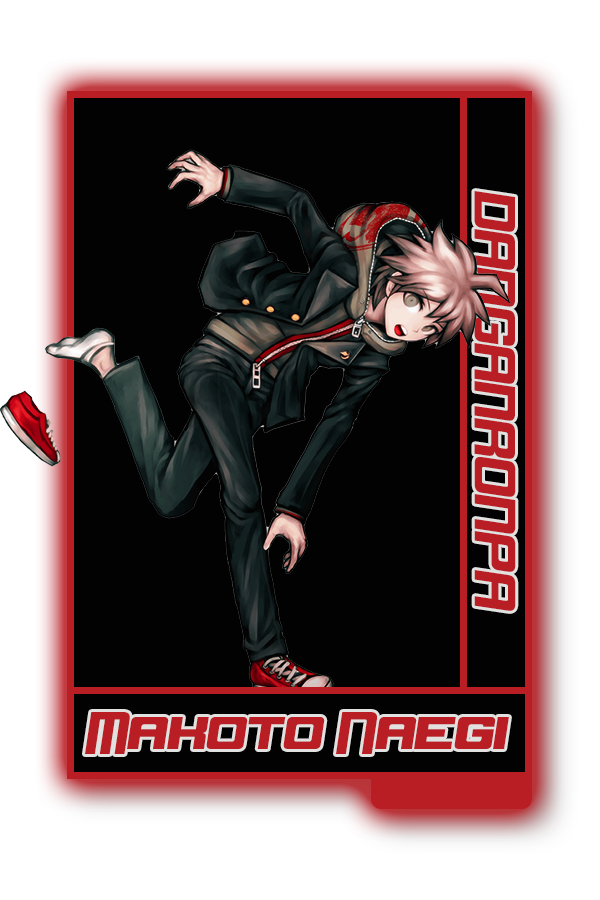
<style>
.page{position:relative;width:600px;height:900px;background:#020202}
.page>*{position:absolute;margin:0}
.t1{font:48.8px "DorBlue";color:#bb2c2e}
.t2{font:50.5px "DorBlue";color:#bb2c2e}
</style>
<div class="page">
<p class="t1" style="left:474px;top:191px;width:42px;height:420px;rotate:90deg">DANGANRONPA</p>
<p class="t2" style="left:85px;top:712px;width:424px;height:42px">Makoto Naegi</p>
</div>
